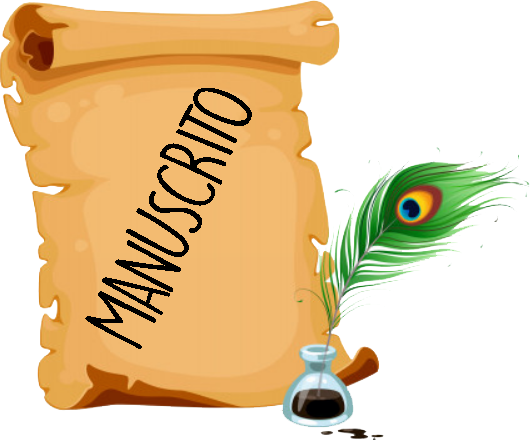
<style>
.page{position:relative;width:530px;height:440px;background:#ffffff}
.page>*{position:absolute;margin:0}
.t1{font:85px "DKLemonYellowSun";letter-spacing:-0.05em;color:#000000;text-transform:uppercase}
</style>
<div class="page">
<p class="t1" style="left:85px;top:88px;width:167px;height:261px;rotate:-64deg">manuscrito</p>
</div>
